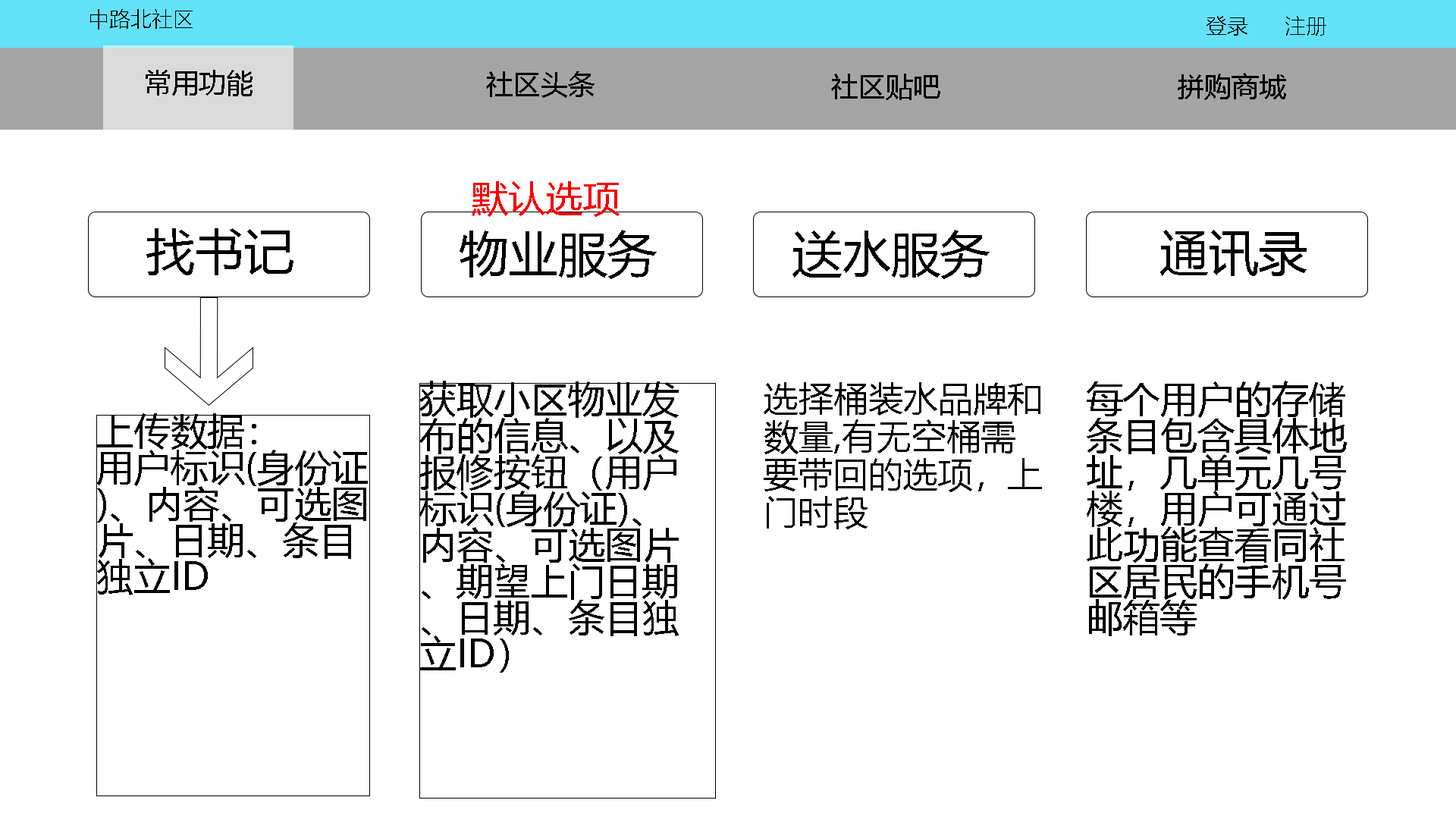
<style>
.page{position:relative;width:1456px;height:819px;background:#ffffff}
.page>*{position:absolute;margin:0}
.t1{font:21.2px "MicrosoftYaHeiLight";color:#000000}
.t2{font:27.3px "MicrosoftYaHei";color:#000000}
.t3{font:37.2px "MicrosoftYaHei";color:#f80000}
.t4{font:49.3px "MicrosoftYaHei";color:#000000}
.t5{font:37.2px/36.4px "MicrosoftYaHei";color:#000000}
.t6{font:34.9px/37.9px "MicrosoftYaHei";color:#000000}
</style>
<div class="page">
<p class="t1" style="left:90px;top:9px;width:103px;height:21px">中路北社区</p>
<p class="t1" style="left:1206px;top:16px;width:120px;height:20px">登录      注册</p>
<p class="t2" style="left:146px;top:70px;width:107px;height:26px">常用功能</p>
<p class="t2" style="left:486px;top:71px;width:109px;height:27px">社区头条</p>
<p class="t2" style="left:831px;top:74px;width:109px;height:26px">社区贴吧</p>
<p class="t2" style="left:1178px;top:73px;width:108px;height:27px">拼购商城</p>
<p class="t3" style="left:472px;top:181px;width:148px;height:36px">默认选项</p>
<p class="t4" style="left:146px;top:228px;width:147px;height:47px">找书记</p>
<p class="t4" style="left:460px;top:230px;width:197px;height:49px">物业服务</p>
<p class="t4" style="left:792px;top:230px;width:198px;height:49px">送水服务</p>
<p class="t4" style="left:1160px;top:230px;width:147px;height:46px">通讯录</p>
<p class="t5" style="left:419px;top:381px;width:260px;height:292px">获取小区物业发布的信息、以及报修按钮（用户标识(身份证)、内容、可选图片、期望上门日期、日期、条目独立ID）</p>
<p class="t6" style="left:764px;top:382px;width:278px;height:147px">选择桶装水品牌和数量,有无空桶需要带回的选项，上门时段</p>
<p class="t5" style="left:1087px;top:381px;width:260px;height:255px">每个用户的存储条目包含具体地址，几单元几号楼，用户可通过此功能查看同社区居民的手机号邮箱等</p>
<p class="t5" style="left:97px;top:413px;width:271px;height:182px">上传数据：<br>用户标识(身份证)、内容、可选图片、日期、条目独立ID</p>
</div>
